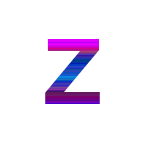
<style>
.page{position:relative;width:144px;height:144px;background:#ffffff}
.page>*{position:absolute;margin:0}
.t1{font:90.9px "HelveticaNeue-Bold"}
</style>
<div class="page">
<p class="t1" style="left:45px;top:39px;width:55px;height:65px">Z</p>
</div>
